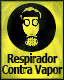
<style>
.page{position:relative;width:64px;height:80px}
.page>*{position:absolute;margin:0}
.t1{font:11.9px "Verdana-Bold";letter-spacing:-0.06em;color:#000001;scale:0.76 1}
</style>
<div class="page">
<p class="t1" style="left:2px;top:53px;width:61px;height:23px;text-align:center">Respirador<br>Contra Vapor</p>
</div>
